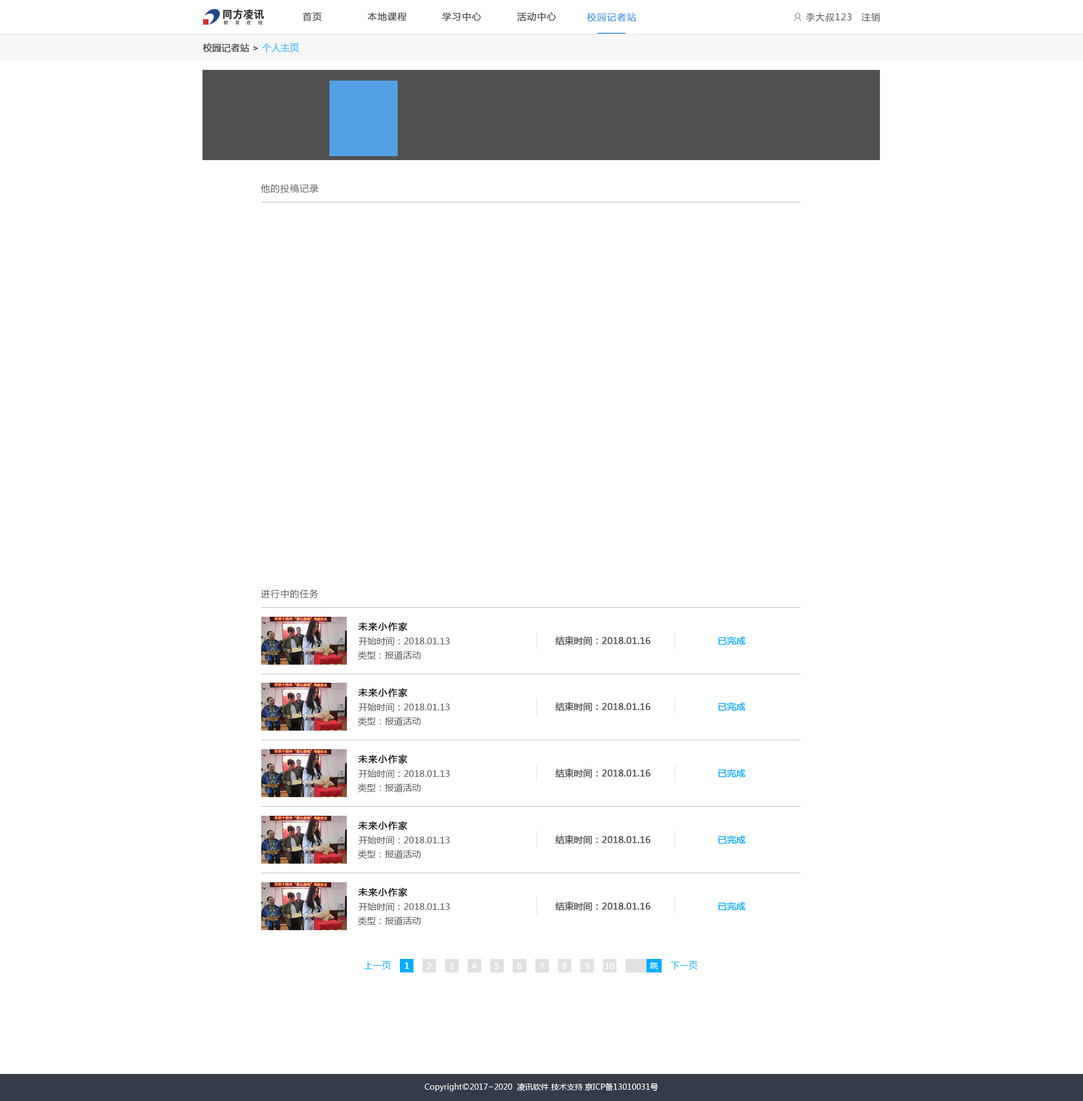
<style>
.page{position:relative;width:1083px;height:1101px;background:#ffffff}
.page>*{position:absolute;margin:0}
.t1{font:9px "MicrosoftYaHei";letter-spacing:0.075em;color:#555555;font-weight:bold}
.t2{font:9px "MicrosoftYaHei";letter-spacing:0.075em;color:#54a0e6;font-weight:bold}
.t3{font:9px "MicrosoftYaHei";letter-spacing:0.075em;color:#555555}
.t4{font:9px "MicrosoftYaHei";color:#555555;font-weight:bold}
.t5{font:9px "MicrosoftYaHei";color:#4dc4fc;font-weight:bold}
.t6{font:9px "MicrosoftYaHei";letter-spacing:0.075em;color:#181617;font-weight:bold}
.t7{font:9px "MicrosoftYaHei";color:#555555}
.t8{font:9px "MicrosoftYaHei";color:#00adff;font-weight:bold}
.t9{font:9px "MicrosoftYaHei";color:#00adff}
.t10{font:7.9px "MicrosoftYaHei";color:#ffffff;font-weight:bold}
.t11{font:7.9px "MicrosoftYaHei";color:#ffffff}
</style>
<div class="page">
<p class="t1" style="left:302px;top:12px;width:19px;height:9px">首页</p>
<p class="t1" style="left:368px;top:12px;width:39px;height:9px">本地课程</p>
<p class="t1" style="left:442px;top:12px;width:39px;height:9px">学习中心</p>
<p class="t1" style="left:517px;top:12px;width:39px;height:9px">活动中心</p>
<p class="t2" style="left:587px;top:12px;width:49px;height:10px">校园记者站</p>
<p class="t3" style="left:805px;top:12px;width:47px;height:10px">李大叔123</p>
<p class="t3" style="left:861px;top:12px;width:19px;height:9px">注销</p>
<p class="t4" style="left:203px;top:43px;width:96px;height:9px">校园记者站 &gt; <span class="t5">个人主页</span></p>
<p class="t3" style="left:261px;top:184px;width:58px;height:9px">他的投稿记录</p>
<p class="t3" style="left:261px;top:589px;width:58px;height:10px">进行中的任务</p>
<p class="t6" style="left:358px;top:622px;width:49px;height:10px">未来小作家</p>
<p class="t7" style="left:358px;top:637px;width:91px;height:9px">开始时间：2018.01.13</p>
<p class="t4" style="left:555px;top:636px;width:96px;height:10px">结束时间：2018.01.16</p>
<p class="t8" style="left:718px;top:637px;width:27px;height:8px">已完成</p>
<p class="t7" style="left:358px;top:651px;width:63px;height:9px">类型：报道活动</p>
<p class="t6" style="left:358px;top:688px;width:49px;height:10px">未来小作家</p>
<p class="t7" style="left:358px;top:703px;width:91px;height:9px">开始时间：2018.01.13</p>
<p class="t4" style="left:555px;top:702px;width:96px;height:10px">结束时间：2018.01.16</p>
<p class="t8" style="left:718px;top:703px;width:27px;height:8px">已完成</p>
<p class="t7" style="left:358px;top:717px;width:63px;height:9px">类型：报道活动</p>
<p class="t6" style="left:358px;top:755px;width:49px;height:9px">未来小作家</p>
<p class="t7" style="left:358px;top:770px;width:91px;height:8px">开始时间：2018.01.13</p>
<p class="t4" style="left:555px;top:769px;width:96px;height:9px">结束时间：2018.01.16</p>
<p class="t8" style="left:718px;top:769px;width:27px;height:9px">已完成</p>
<p class="t7" style="left:358px;top:783px;width:63px;height:10px">类型：报道活动</p>
<p class="t6" style="left:358px;top:821px;width:49px;height:10px">未来小作家</p>
<p class="t7" style="left:358px;top:836px;width:91px;height:9px">开始时间：2018.01.13</p>
<p class="t4" style="left:555px;top:835px;width:96px;height:10px">结束时间：2018.01.16</p>
<p class="t8" style="left:718px;top:836px;width:27px;height:8px">已完成</p>
<p class="t7" style="left:358px;top:850px;width:63px;height:9px">类型：报道活动</p>
<p class="t6" style="left:358px;top:888px;width:49px;height:9px">未来小作家</p>
<p class="t7" style="left:358px;top:903px;width:91px;height:8px">开始时间：2018.01.13</p>
<p class="t4" style="left:555px;top:902px;width:96px;height:9px">结束时间：2018.01.16</p>
<p class="t8" style="left:718px;top:902px;width:27px;height:9px">已完成</p>
<p class="t7" style="left:358px;top:916px;width:63px;height:10px">类型：报道活动</p>
<p class="t9" style="left:364px;top:961px;width:27px;height:9px">上一页</p>
<p class="t10" style="left:405px;top:963px;width:4px;height:6px">1</p>
<p class="t10" style="left:427px;top:963px;width:4px;height:7px">2</p>
<p class="t10" style="left:449px;top:963px;width:5px;height:7px">3</p>
<p class="t10" style="left:471px;top:963px;width:6px;height:7px">4</p>
<p class="t10" style="left:495px;top:963px;width:4px;height:7px">5</p>
<p class="t10" style="left:517px;top:963px;width:5px;height:7px">6</p>
<p class="t10" style="left:540px;top:963px;width:4px;height:7px">7</p>
<p class="t10" style="left:562px;top:963px;width:5px;height:7px">8</p>
<p class="t10" style="left:585px;top:963px;width:4px;height:7px">9</p>
<p class="t10" style="left:605px;top:963px;width:10px;height:7px">10</p>
<p class="t11" style="left:650px;top:963px;width:8px;height:6px">跳</p>
<p class="t9" style="left:670px;top:961px;width:28px;height:9px">下一页</p>
<p class="t11" style="left:425px;top:1083px;width:233px;height:9px">Copyright©2017~2020  凌讯软件 技术支持 京ICP备13010031号</p>
</div>
